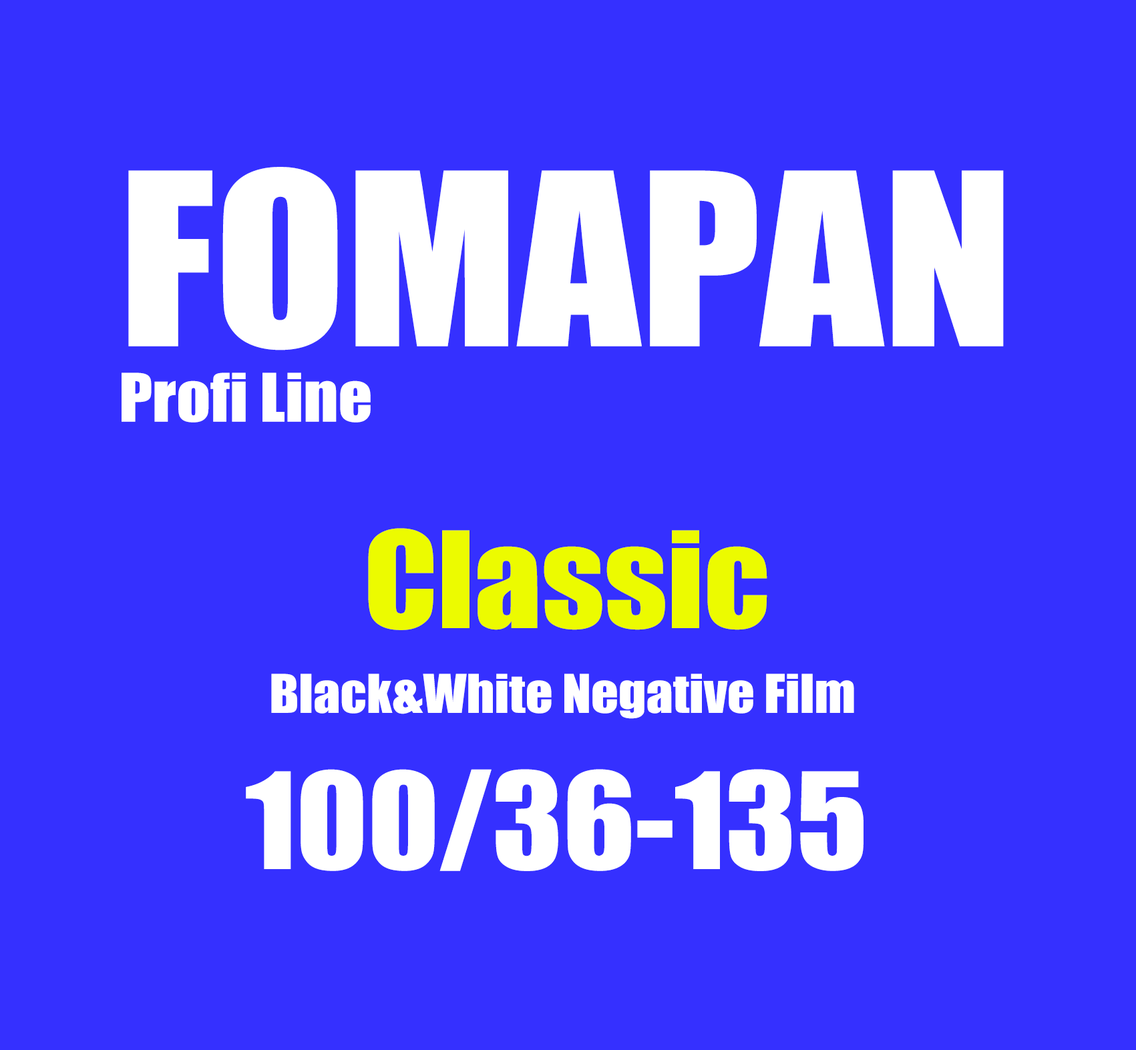
<style>
.page{position:relative;width:1136px;height:1050px;background:#3530ff}
.page>*{position:absolute;margin:0}
.t1{font:222.2px "Impact";color:#ffffff;scale:1.08 1}
.t2{font:61.7px "Impact";color:#ffffff;scale:1.08 1}
.t3{font:123.4px "Impact";color:#ecfb00;scale:1.08 1}
.t4{font:49.4px "Impact";color:#ffffff;scale:1.08 1}
.t5{font:123.4px "Impact";color:#ffffff;scale:1.08 1}
</style>
<div class="page">
<p class="t1" style="left:128px;top:167px;width:875px;height:183px">FOMAPAN</p>
<p class="t2" style="left:121px;top:373px;width:250px;height:50px">Profi Line</p>
<p class="t3" style="left:368px;top:528px;width:399px;height:102px">Classic</p>
<p class="t4" style="left:271px;top:674px;width:583px;height:45px">Black&amp;White Negative Film</p>
<p class="t5" style="left:246px;top:769px;width:617px;height:102px">100/36-135</p>
</div>
